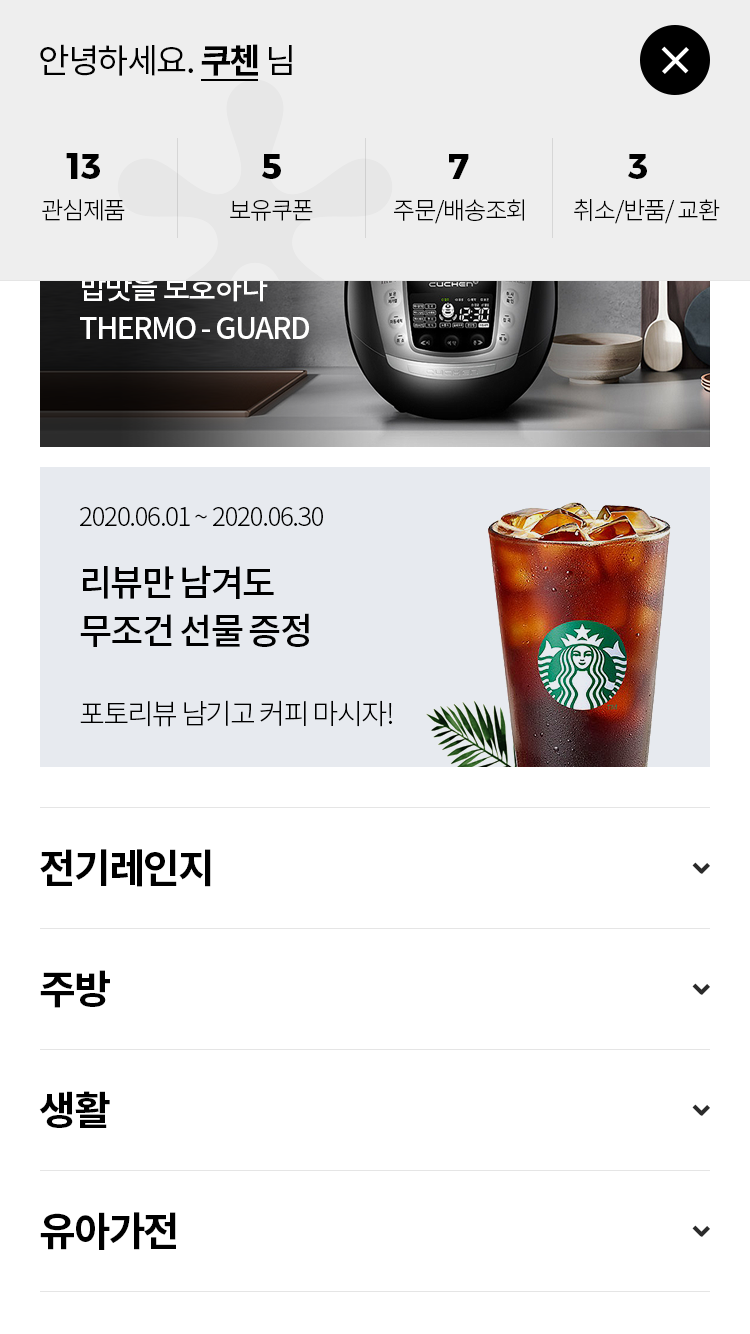
<style>
.page{position:relative;width:750px;height:1334px;background:#ffffff}
.page>*{position:absolute;margin:0}
.t1{font:34px "NotoSansCJKkr-Regular";letter-spacing:-0.05em;color:#000000}
.t2{font:34px "NotoSansCJKkr-Bold";letter-spacing:-0.05em;color:#000000}
.t3{font:36px "Montserrat-Bold";color:#000000}
.t4{font:24px "NotoSansCJKkr-Light";letter-spacing:-0.05em;color:#000000}
.t5{font:30px/40px "NotoSansCJKkr-Medium";letter-spacing:-0.05em;color:#ffffff}
.t6{font:26px "NotoSansCJKkr-Light";letter-spacing:-0.05em;color:#000000}
.t7{font:36px/48px "NotoSansCJKkr-Medium";letter-spacing:-0.05em;color:#000000}
.t8{font:28px "NotoSansCJKkr-Light";letter-spacing:-0.05em;color:#000000}
.t9{font:40px "NotoSansCJKkr-Bold";letter-spacing:-0.05em;color:#000000}
</style>
<div class="page">
<p class="t1" style="left:40px;top:44px;width:252px;height:32px">안녕하세요. <span class="t2">쿠첸 </span>님</p>
<p class="t3" style="left:66px;top:153px;width:34px;height:26px">13</p>
<p class="t3" style="left:262px;top:154px;width:19px;height:25px">5</p>
<p class="t3" style="left:449px;top:154px;width:20px;height:25px">7</p>
<p class="t3" style="left:628px;top:154px;width:19px;height:25px">3</p>
<p class="t4" style="left:42px;top:199px;width:83px;height:22px">관심제품</p>
<p class="t4" style="left:230px;top:200px;width:83px;height:21px">보유쿠폰</p>
<p class="t4" style="left:394px;top:199px;width:130px;height:25px">주문/배송조회</p>
<p class="t4" style="left:574px;top:199px;width:146px;height:25px">취소/반품/ 교환</p>
<p class="t5" style="left:80px;top:234px;width:229px;height:105px">온기를 꽉 잡아<br>밥맛을 보호하다<br>THERMO - GUARD</p>
<p class="t6" style="left:80px;top:507px;width:243px;height:19px">2020.06.01 ~ 2020.06.30</p>
<p class="t7" style="left:80px;top:565px;width:229px;height:82px">리뷰만 남겨도<br>무조건 선물 증정</p>
<p class="t8" style="left:80px;top:700px;width:312px;height:27px">포토리뷰 남기고 커피 마시자!</p>
<p class="t9" style="left:40px;top:849px;width:171px;height:38px">전기레인지</p>
<p class="t9" style="left:40px;top:970px;width:70px;height:38px">주방</p>
<p class="t9" style="left:39px;top:1091px;width:71px;height:37px">생활</p>
<p class="t9" style="left:40px;top:1212px;width:136px;height:38px">유아가전</p>
</div>
